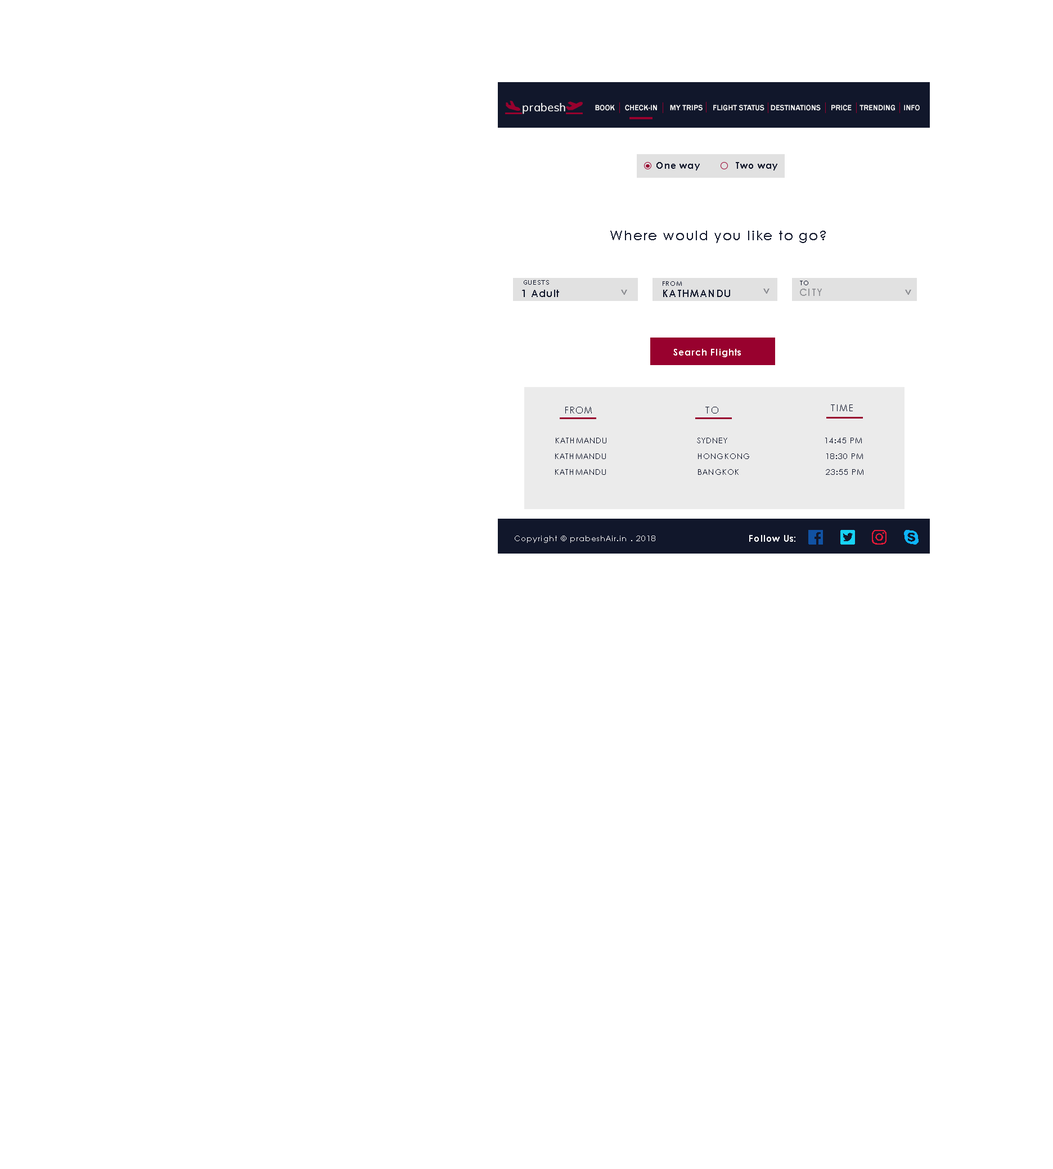
<style>
.page{position:relative;width:1053px;height:1169px;background:#ffffff}
.page>*{position:absolute;margin:0}
.t1{font:7.9px "FranklinGothic-Medium";letter-spacing:0.005em;color:#ffffff}
.t2{font:9px "CenturyGothic-Bold";letter-spacing:0.075em;color:#11172b}
.t3{font:13.5px "CenturyGothic";letter-spacing:0.075em;color:#11172b}
.t4{font:6.2px "CenturyGothic";letter-spacing:0.075em;color:#11172b}
.t5{font:10.1px "CenturyGothic-Bold";letter-spacing:0.075em;color:#11172b}
.t6{font:10.1px "CenturyGothic-Bold";letter-spacing:0.075em;color:#8c8d92}
.t7{font:10.1px "CenturyGothic-Bold";letter-spacing:0.075em;color:#95969a}
.t8{font:9px "CenturyGothic-Bold";letter-spacing:0.075em;color:#ffffff}
.t9{font:9px "CenturyGothic";letter-spacing:0.075em;color:#11172b}
.t10{font:7.9px "CenturyGothic";letter-spacing:0.075em;color:#11172b}
.t11{font:7.9px "CenturyGothic";letter-spacing:0.075em;color:#ffffff}
</style>
<div class="page">
<p class="t1" style="left:595px;top:105px;width:325px;height:6px">BOOK     CHECK-IN      MY TRIPS     FLIGHT STATUS   DESTINATIONS     PRICE    TRENDING    INFO</p>
<p class="t2" style="left:656px;top:162px;width:44px;height:8px">One way</p>
<p class="t2" style="left:736px;top:162px;width:41px;height:8px">Two way</p>
<p class="t3" style="left:610px;top:231px;width:216px;height:12px">Where would you like to go?</p>
<p class="t4" style="left:663px;top:281px;width:19px;height:5px">FROM</p>
<p class="t4" style="left:800px;top:281px;width:8px;height:4px">TO</p>
<p class="t5" style="left:522px;top:290px;width:37px;height:7px">1 Adult</p>
<p class="t6" style="left:621px;top:290px;width:6px;height:5px;rotate:89deg">&gt;</p>
<p class="t5" style="left:663px;top:290px;width:67px;height:7px">KATHMANDU</p>
<p class="t6" style="left:763px;top:289px;width:7px;height:5px;rotate:89deg">&gt;</p>
<p class="t7" style="left:800px;top:289px;width:22px;height:7px">CITY</p>
<p class="t6" style="left:905px;top:290px;width:6px;height:5px;rotate:89deg">&gt;</p>
<p class="t8" style="left:673px;top:349px;width:68px;height:8px">Search Flights</p>
<p class="t9" style="left:565px;top:407px;width:27px;height:6px">FROM</p>
<p class="t9" style="left:705px;top:407px;width:13px;height:6px">TO</p>
<p class="t9" style="left:831px;top:404px;width:22px;height:7px">TIME</p>
<p class="t10" style="left:556px;top:438px;width:50px;height:5px">KATHMANDU</p>
<p class="t10" style="left:697px;top:438px;width:30px;height:5px">SYDNEY</p>
<p class="t10" style="left:825px;top:438px;width:37px;height:5px">14:45 PM</p>
<p class="t10" style="left:555px;top:453px;width:51px;height:6px">KATHMANDU</p>
<p class="t10" style="left:698px;top:453px;width:51px;height:6px">HONGKONG</p>
<p class="t10" style="left:826px;top:453px;width:37px;height:6px">18:30 PM</p>
<p class="t10" style="left:555px;top:469px;width:51px;height:6px">KATHMANDU</p>
<p class="t10" style="left:698px;top:469px;width:41px;height:6px">BANGKOK</p>
<p class="t10" style="left:826px;top:469px;width:37px;height:6px">23:55 PM</p>
<p class="t11" style="left:515px;top:536px;width:140px;height:7px">Copyright © prabeshAir.in . 2018</p>
<p class="t8" style="left:749px;top:535px;width:46px;height:7px">Follow Us:</p>
</div>
